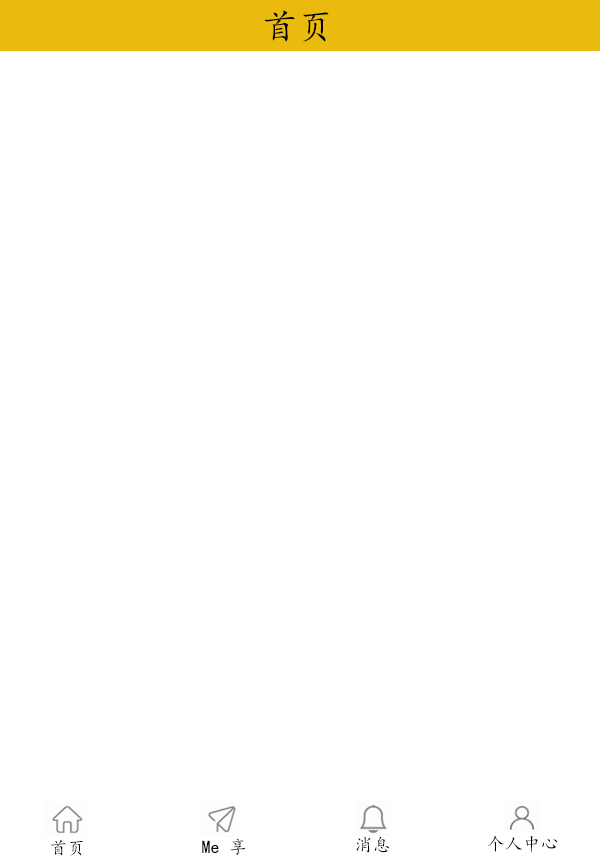
<style>
.page{position:relative;width:600px;height:858px;background:#ffffff}
.page>*{position:absolute;margin:0}
.t1{font:36px "KaiTi";color:#000000}
.t2{font:18px "KaiTi";color:#000000}
</style>
<div class="page">
<p class="t1" style="left:264px;top:10px;width:65px;height:32px">首页</p>
<p class="t2" style="left:50px;top:840px;width:33px;height:16px">首页</p>
<p class="t2" style="left:202px;top:838px;width:44px;height:17px">Me 享</p>
<p class="t2" style="left:356px;top:836px;width:33px;height:17px">消息</p>
<p class="t2" style="left:487px;top:835px;width:70px;height:18px">个人中心</p>
</div>
